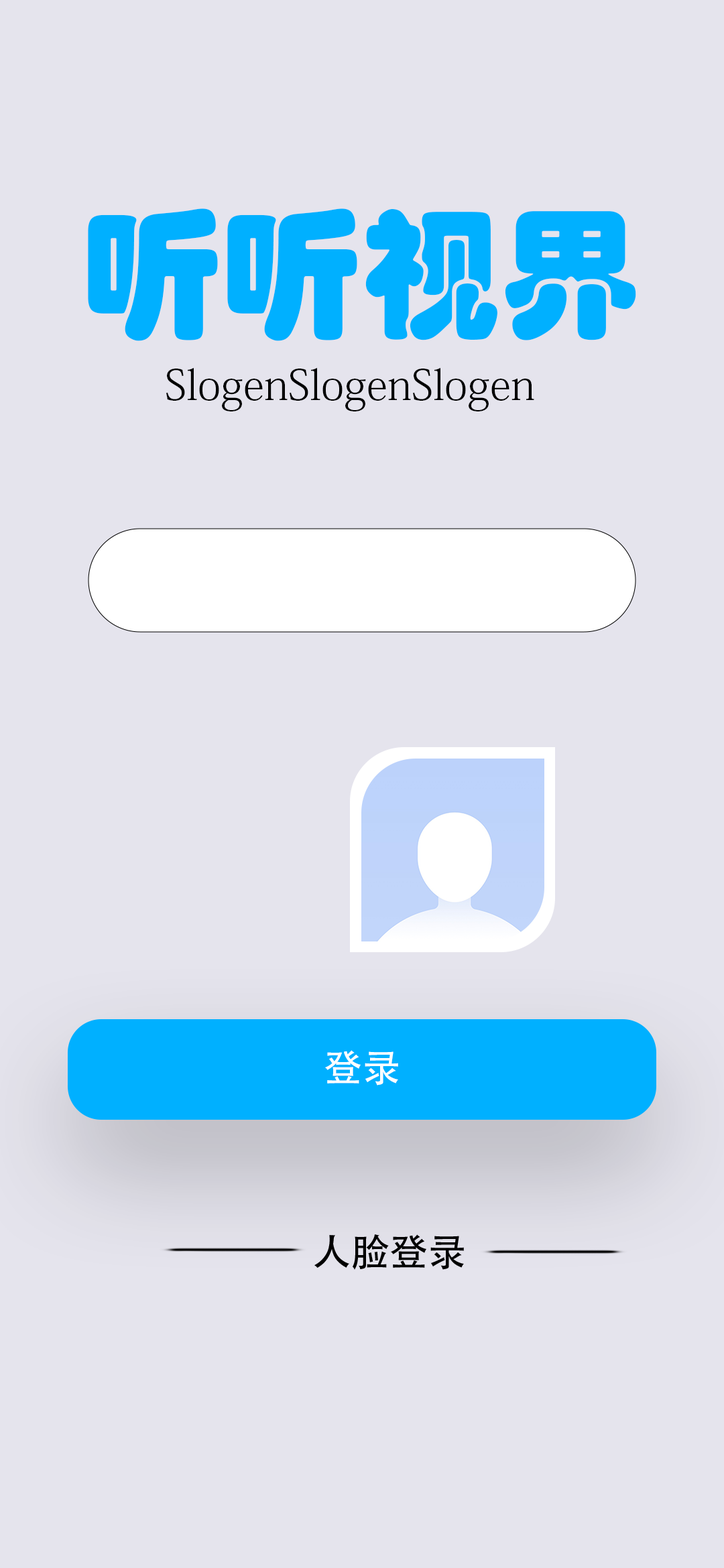
<style>
.page{position:relative;width:724px;height:1568px;background:#e5e4ed}
.page>*{position:absolute;margin:0}
.t1{font:139.6px "STHupo";color:#00b0ff}
.t2{font:41.9px "AdobeFangsongStd-Regular";color:#000000}
.t3{font:38.4px "AdobeHeitiStd-Regular";color:#ffffff}
</style>
<div class="page">
<p class="t1" style="left:88px;top:208px;width:548px;height:133px">听听视界</p>
<p class="t2" style="left:166px;top:368px;width:368px;height:43px">SlogenSlogenSlogen</p>
<p class="t3" style="left:325px;top:1050px;width:73px;height:36px">登录</p>
</div>
